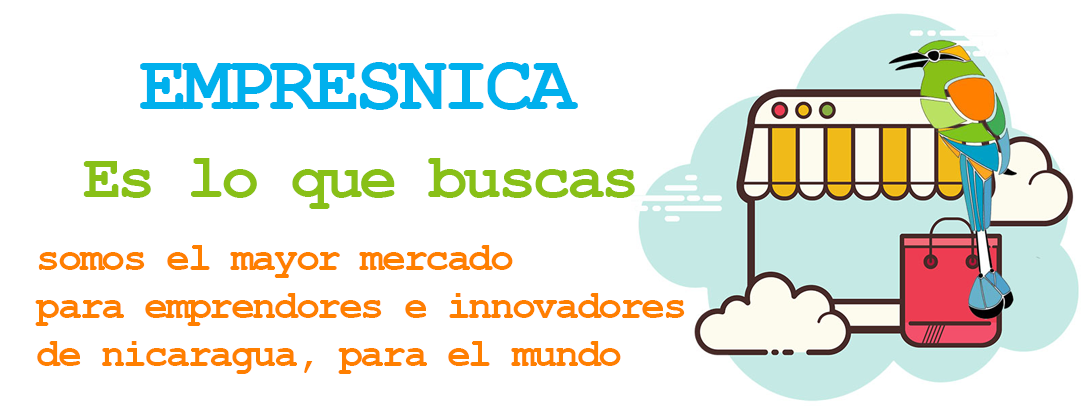
<style>
.page{position:relative;width:1088px;height:406px;background:#ffffff}
.page>*{position:absolute;margin:0}
.t1{font:80px "CourierNewPS-BoldMT";letter-spacing:-0.06em;color:#00b0ed}
.t2{font:64px "CourierNewPS-BoldMT";letter-spacing:-0.06em;color:#88c017}
.t3{font:40px "CourierNewPS-BoldMT";letter-spacing:-0.06em;color:#ff7f00}
</style>
<div class="page">
<p class="t1" style="left:140px;top:62px;width:438px;height:48px">EMPRESNICA</p>
<p class="t2" style="left:83px;top:158px;width:552px;height:51px">Es lo que buscas</p>
<p class="t3" style="left:35px;top:245px;width:650px;height:129px">somos el mayor mercado<br>para emprendores e innovadores<br>de nicaragua, para el mundo</p>
</div>
